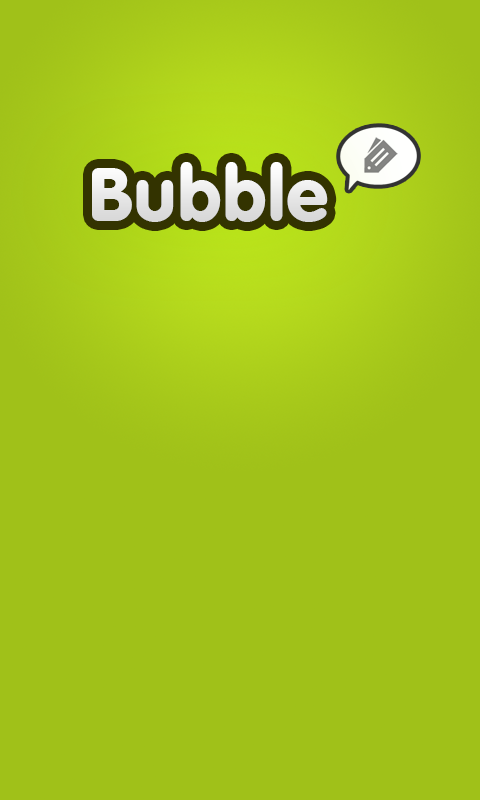
<style>
.page{position:relative;width:480px;height:800px;background:#a0c119}
.page>*{position:absolute;margin:0}
.t1{font:80px "VAGRound";letter-spacing:-0.025em;color:#e7e7e7}
</style>
<div class="page">
<p class="t1" style="left:92px;top:162px;width:236px;height:60px">Bubble</p>
</div>
